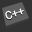
<style>
.page{position:relative;width:32px;height:32px;background:#333333}
.page>*{position:absolute;margin:0}
.t1{font:11px "Roboto-Regular";color:#ffffff}
</style>
<div class="page">
<p class="t1" style="left:5px;top:8px;width:19px;height:12px;rotate:-19deg">C++</p>
</div>
